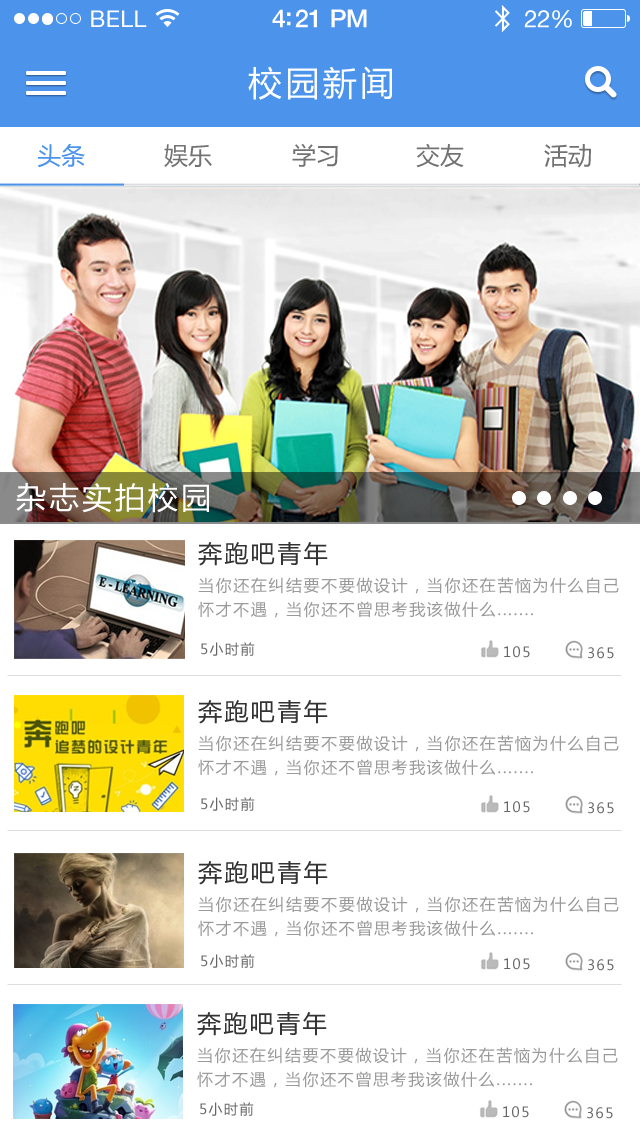
<style>
.page{position:relative;width:640px;height:1136px;background:#ffffff}
.page>*{position:absolute;margin:0}
.t1{font:23px "HelveticaNeue";letter-spacing:0.02em;color:#ffffff}
.t2{font:25px "HelveticaNeue-Medium";letter-spacing:-0.02em;color:#ffffff}
.t3{font:24px "HelveticaNeue";letter-spacing:-0.02em;color:#ffffff}
.t4{font:34px "MicrosoftYaHei";letter-spacing:0.1em;color:#ffffff}
.t5{font:24px "MicrosoftYaHei";color:#4c93eb}
.t6{font:24px "MicrosoftYaHei";color:#727272}
.t7{font:30px "MicrosoftYaHei";letter-spacing:0.1em;color:#ffffff}
.t8{font:24px "MicrosoftYaHei";letter-spacing:0.1em;color:#333333}
.t9{font:16px/24px "MicrosoftYaHei";letter-spacing:0.1em;color:#9a9a9a}
.t10{font:14px "MicrosoftYaHei";letter-spacing:0.1em;color:#666666}
</style>
<div class="page">
<p class="t1" style="left:91px;top:10px;width:56px;height:17px">BELL</p>
<p class="t2" style="left:272px;top:9px;width:95px;height:19px">4:21 PM</p>
<p class="t3" style="left:524px;top:10px;width:48px;height:18px">22%</p>
<p class="t4" style="left:248px;top:66px;width:144px;height:34px">校园新闻</p>
<p class="t5" style="left:37px;top:144px;width:48px;height:24px">头条</p>
<p class="t6" style="left:164px;top:144px;width:48px;height:24px">娱乐</p>
<p class="t6" style="left:292px;top:143px;width:46px;height:24px">学习</p>
<p class="t6" style="left:416px;top:143px;width:48px;height:25px">交友</p>
<p class="t6" style="left:544px;top:144px;width:47px;height:24px">活动</p>
<p class="t7" style="left:16px;top:483px;width:193px;height:30px">杂志实拍校园</p>
<p class="t8" style="left:198px;top:542px;width:130px;height:24px">奔跑吧青年</p>
<p class="t9" style="left:198px;top:577px;width:421px;height:41px">当你还在纠结要不要做设计，当你还在苦恼为什么自己<br>怀才不遇，当你还不曾思考我该做什么.......</p>
<p class="t8" style="left:198px;top:700px;width:130px;height:24px">奔跑吧青年</p>
<p class="t9" style="left:198px;top:735px;width:421px;height:41px">当你还在纠结要不要做设计，当你还在苦恼为什么自己<br>怀才不遇，当你还不曾思考我该做什么.......</p>
<p class="t8" style="left:198px;top:861px;width:130px;height:24px">奔跑吧青年</p>
<p class="t9" style="left:198px;top:896px;width:421px;height:41px">当你还在纠结要不要做设计，当你还在苦恼为什么自己<br>怀才不遇，当你还不曾思考我该做什么.......</p>
<p class="t10" style="left:201px;top:954px;width:54px;height:14px">5小时前</p>
<p class="t10" style="left:504px;top:958px;width:26px;height:12px">105</p>
<p class="t10" style="left:588px;top:959px;width:26px;height:12px">365</p>
<p class="t8" style="left:197px;top:1012px;width:130px;height:24px">奔跑吧青年</p>
<p class="t9" style="left:197px;top:1047px;width:421px;height:41px">当你还在纠结要不要做设计，当你还在苦恼为什么自己<br>怀才不遇，当你还不曾思考我该做什么.......</p>
</div>
